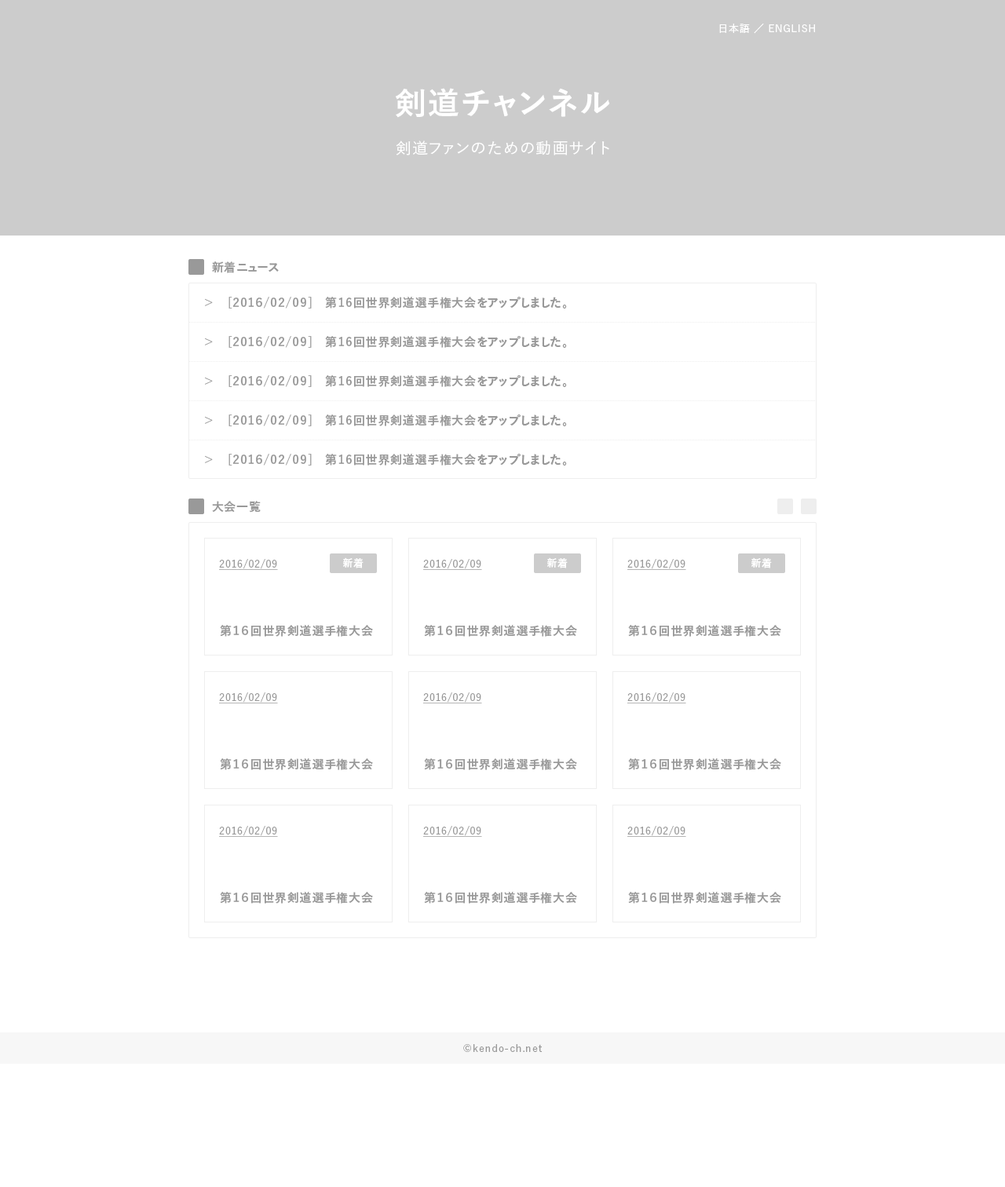
<style>
.page{position:relative;width:1005px;height:1187px;background:#ffffff}
.page>*{position:absolute;margin:0}
.t1{font:10.2px "YuGo-Medium";letter-spacing:0.05em;color:#ffffff}
.t2{font:31.4px "YuGo-Bold";letter-spacing:0.05em;color:#ffffff}
.t3{font:15.7px "YuGo-Medium";letter-spacing:0.05em;color:#ffffff}
.t4{font:11.8px "YuGo-Bold";letter-spacing:0.05em;color:#999999}
.t5{font:11.8px/39.2px "YuGo-Bold";letter-spacing:0.05em;color:#999999}
.t6{font:10.2px "YuGo-Bold";letter-spacing:0.05em;color:#ffffff}
.t7{font:10.2px "YuGo-Medium";letter-spacing:0.05em;color:#999999;text-decoration:underline}
.t8{font:10.2px "YuGo-Medium";letter-spacing:0.05em;color:#999999}
</style>
<div class="page">
<p class="t1" style="left:719px;top:24px;width:96px;height:10px">日本語 ／ ENGLISH</p>
<p class="t2" style="left:395px;top:88px;width:215px;height:30px">剣道チャンネル</p>
<p class="t3" style="left:396px;top:141px;width:213px;height:14px">剣道ファンのための動画サイト</p>
<p class="t4" style="left:212px;top:261px;width:67px;height:12px">新着ニュース</p>
<p class="t5" style="left:205px;top:298px;width:8px;height:165px">&gt;<br>&gt;<br>&gt;<br>&gt;<br>&gt;</p>
<p class="t5" style="left:228px;top:297px;width:339px;height:168px">[2016/02/09]　第16回世界剣道選手権大会をアップしました。<br>[2016/02/09]　第16回世界剣道選手権大会をアップしました。<br>[2016/02/09]　第16回世界剣道選手権大会をアップしました。<br>[2016/02/09]　第16回世界剣道選手権大会をアップしました。<br>[2016/02/09]　第16回世界剣道選手権大会をアップしました。</p>
<p class="t4" style="left:212px;top:501px;width:49px;height:12px">大会一覧</p>
<p class="t6" style="left:343px;top:557px;width:20px;height:11px">新着</p>
<p class="t6" style="left:547px;top:557px;width:21px;height:11px">新着</p>
<p class="t6" style="left:751px;top:557px;width:21px;height:11px">新着</p>
<p class="t7" style="left:219px;top:559px;width:59px;height:11px">2016/02/09</p>
<p class="t7" style="left:423px;top:559px;width:59px;height:11px">2016/02/09</p>
<p class="t7" style="left:627px;top:559px;width:59px;height:11px">2016/02/09</p>
<p class="t4" style="left:220px;top:625px;width:153px;height:12px">第１６回世界剣道選手権大会</p>
<p class="t4" style="left:424px;top:625px;width:153px;height:12px">第１６回世界剣道選手権大会</p>
<p class="t4" style="left:628px;top:625px;width:153px;height:12px">第１６回世界剣道選手権大会</p>
<p class="t7" style="left:219px;top:692px;width:59px;height:11px">2016/02/09</p>
<p class="t7" style="left:423px;top:692px;width:59px;height:11px">2016/02/09</p>
<p class="t7" style="left:627px;top:692px;width:59px;height:11px">2016/02/09</p>
<p class="t4" style="left:220px;top:758px;width:153px;height:12px">第１６回世界剣道選手権大会</p>
<p class="t4" style="left:424px;top:758px;width:153px;height:12px">第１６回世界剣道選手権大会</p>
<p class="t4" style="left:628px;top:758px;width:153px;height:12px">第１６回世界剣道選手権大会</p>
<p class="t7" style="left:219px;top:826px;width:59px;height:11px">2016/02/09</p>
<p class="t7" style="left:423px;top:826px;width:59px;height:11px">2016/02/09</p>
<p class="t7" style="left:627px;top:826px;width:59px;height:11px">2016/02/09</p>
<p class="t4" style="left:220px;top:892px;width:153px;height:11px">第１６回世界剣道選手権大会</p>
<p class="t4" style="left:424px;top:892px;width:153px;height:11px">第１６回世界剣道選手権大会</p>
<p class="t4" style="left:628px;top:892px;width:153px;height:11px">第１６回世界剣道選手権大会</p>
<p class="t8" style="left:463px;top:1044px;width:79px;height:8px">©kendo-ch.net</p>
</div>
